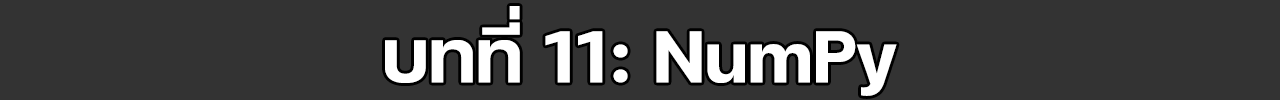
<style>
.page{position:relative;width:1280px;height:100px;background:#333333}
.page>*{position:absolute;margin:0}
.t1{font:100px "FCMinimalBold";color:#ffffff}
</style>
<div class="page">
<p class="t1" style="left:385px;top:6px;width:512px;height:90px">บทที่ 11: NumPy</p>
</div>
